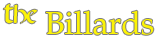
<style>
.page{position:relative;width:162px;height:43px;background:#ffffff}
.page>*{position:absolute;margin:0}
.t1{font:24px "OPENCLASSIC";color:#fcf306}
.t2{font:32px "Palatino-Roman";color:#fcf306}
</style>
<div class="page">
<p class="t1" style="left:3px;top:3px;width:34px;height:21px">the</p>
<p class="t2" style="left:46px;top:10px;width:108px;height:25px">Billards</p>
</div>
